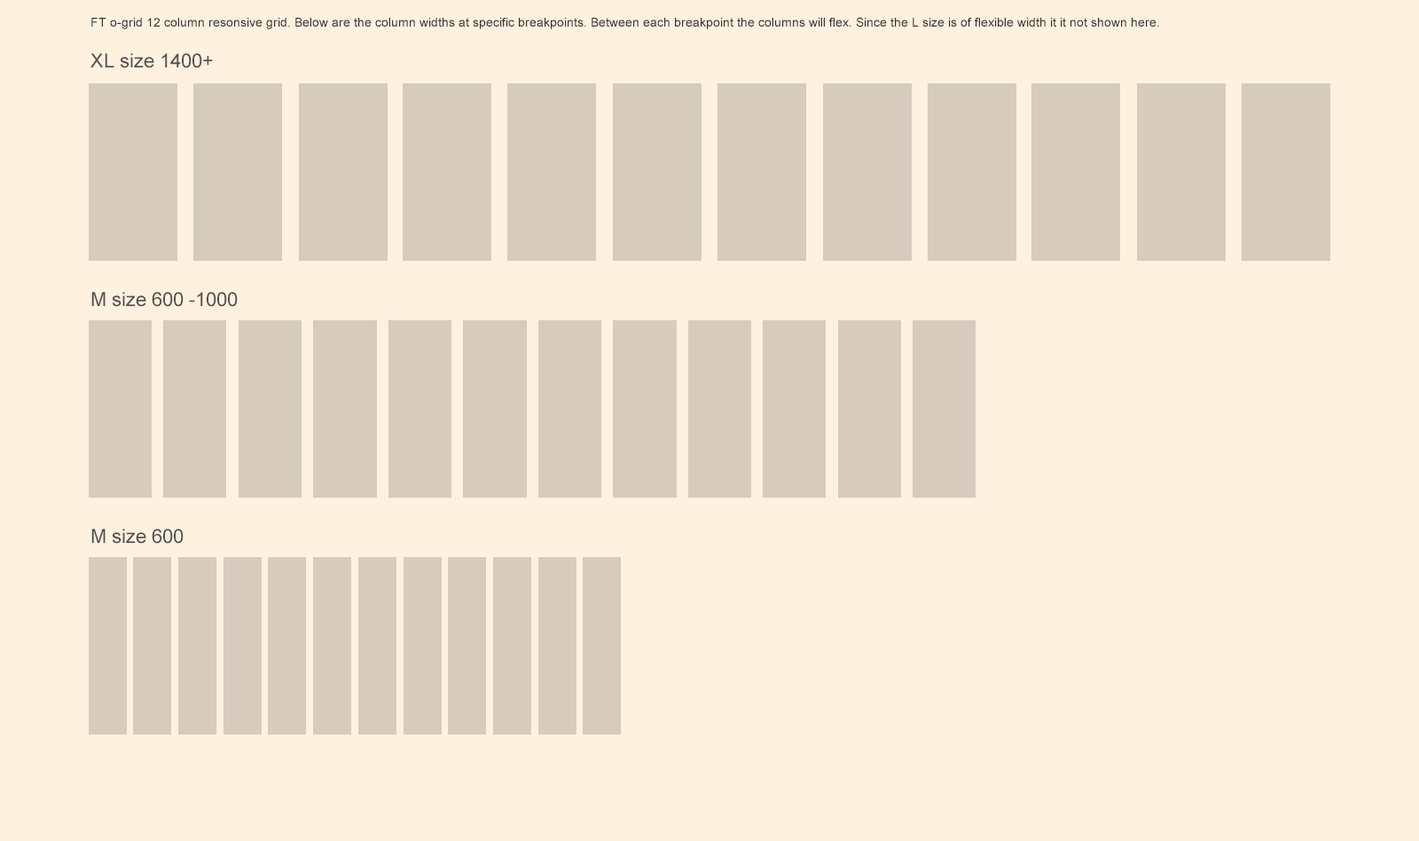
<style>
.page{position:relative;width:1419px;height:841px;background:#fff1e0}
.page>*{position:absolute;margin:0}
.t1{font:12.4px "ArialMT";color:#333333}
.t2{font:19.5px "ArialMT";color:#505050}
</style>
<div class="page">
<p class="t1" style="left:91px;top:17px;width:1068px;height:12px">FT o-grid 12 column resonsive grid. Below are the column widths at specific breakpoints. Between each breakpoint the columns will flex. Since the L size is of flexible width it it not shown here.</p>
<p class="t2" style="left:90px;top:53px;width:123px;height:15px">XL size 1400+</p>
<p class="t2" style="left:91px;top:292px;width:147px;height:15px">M size 600 -1000</p>
<p class="t2" style="left:91px;top:528px;width:93px;height:16px">M size 600</p>
</div>
